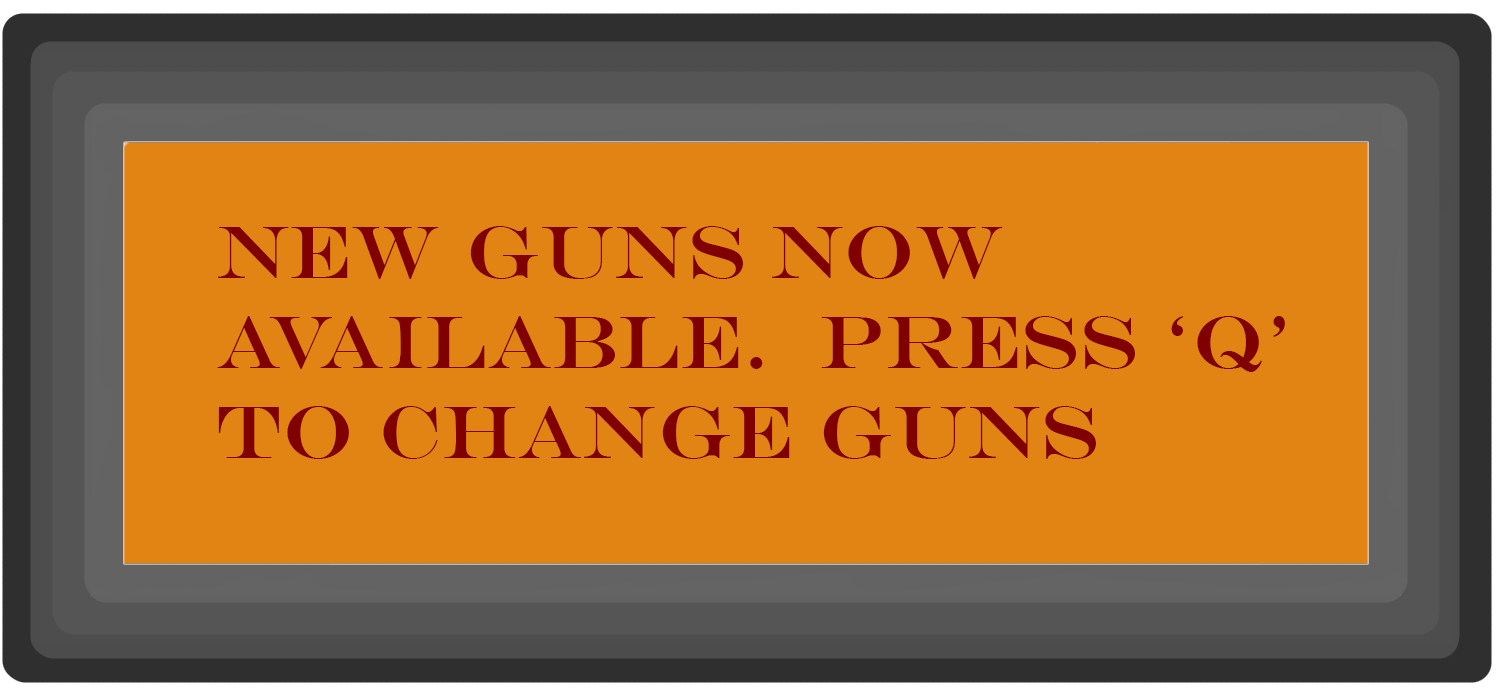
<style>
.page{position:relative;width:1500px;height:700px;background:#e28413}
.page>*{position:absolute;margin:0}
.t1{font:75px "EngraversMT";color:#800000}
</style>
<div class="page">
<p class="t1" style="left:217px;top:226px;width:1068px;height:233px">New guns now available.  Press ‘q’ to change guns</p>
</div>
